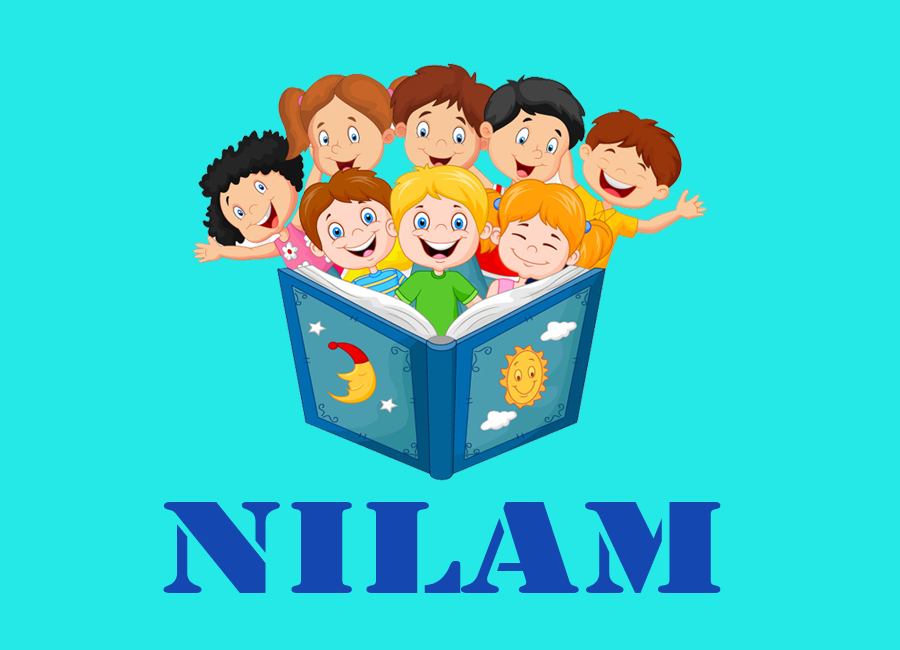
<style>
.page{position:relative;width:900px;height:650px;background:#25e9e7}
.page>*{position:absolute;margin:0}
.t1{font:136.8px "Stencil";color:#1447b0;scale:1.39 1}
</style>
<div class="page">
<p class="t1" style="left:163px;top:502px;width:558px;height:91px">NILAM</p>
</div>
